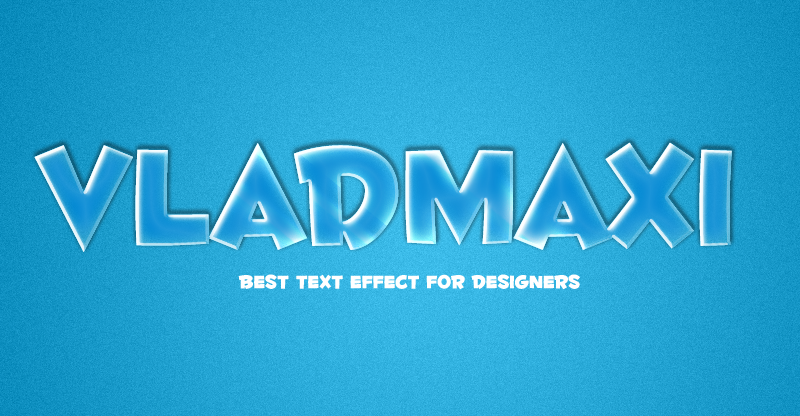
<style>
.page{position:relative;width:800px;height:416px}
.page>*{position:absolute;margin:0}
.t1{font:165px "FontdinerdotcomHuggable"}
.t2{font:22px "FontdinerdotcomHuggable";color:#ffffff}
</style>
<div class="page">
<p class="t1" style="left:34px;top:142px;width:698px;height:110px">Vladmaxi</p>
<p class="t2" style="left:238px;top:274px;width:342px;height:16px">best text effect for designers</p>
</div>
